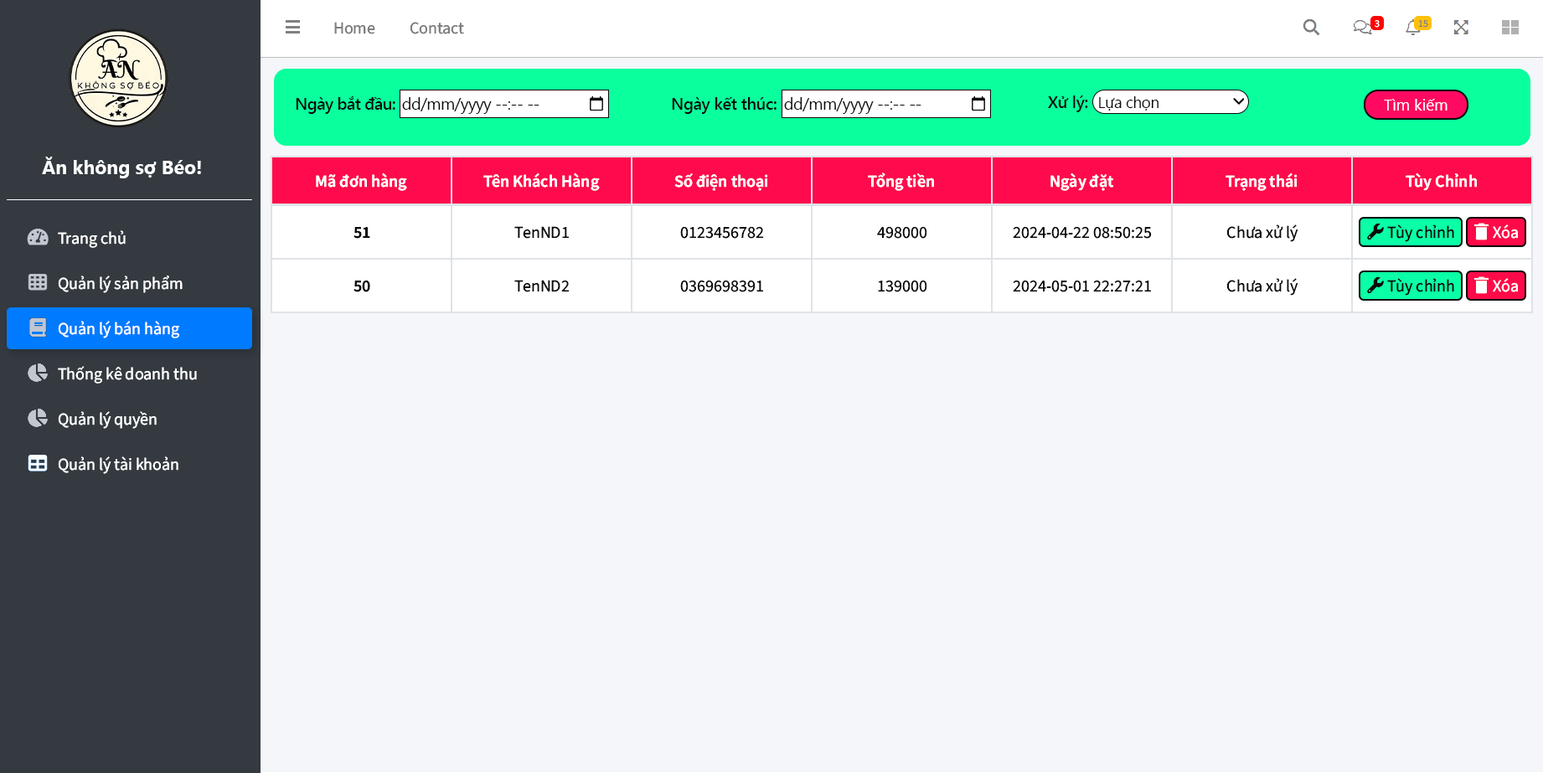
<style>
.page{position:relative;width:1543px;height:773px;background:#f4f6f9}
.page>*{position:absolute;margin:0}
.t1{font:16.7px "SourceSansRoman-Regular";color:#7f7f7f}
.t2{font:10px "SourceSansRoman-Regular";color:#ffffff}
.t3{font:10px "SourceSansRoman-Regular";color:#857f7f}
.t4{font:16.7px "SegoeUI-Semibold";letter-spacing:-0.03em;color:#000000}
.t5{font:16.7px "SegoeUI";letter-spacing:-0.03em;color:#000000}
.t6{font:16.7px "SegoeUI-Semibold";letter-spacing:-0.02em;color:#000000}
.t7{font:15.9px "SegoeUI";letter-spacing:-0.02em;color:#000000}
.t8{font:15.9px "SegoeUI";color:#ffffff}
.t9{font:19.3px "SegoeUI-Bold";color:#ffffff}
.t10{font:16.7px "SourceSansRoman-Semibold";color:#ffffff}
.t11{font:16.7px "SourceSansRoman-Regular";color:#ffffff}
.t12{font:16.7px "SourceSansRoman-Semibold";color:#000000}
.t13{font:16.7px "SourceSansRoman-Regular";color:#000000}
</style>
<div class="page">
<p class="t1" style="left:334px;top:22px;width:41px;height:12px">Home</p>
<p class="t1" style="left:410px;top:22px;width:54px;height:12px">Contact</p>
<p class="t2" style="left:1374px;top:20px;width:5px;height:8px">3</p>
<p class="t3" style="left:1418px;top:20px;width:10px;height:8px">15</p>
<p class="t4" style="left:296px;top:96px;width:99px;height:18px">Ngày bắt đầu:</p>
<p class="t5" style="left:402px;top:97px;width:137px;height:17px">dd/mm/yyyy --:-- --</p>
<p class="t6" style="left:672px;top:97px;width:104px;height:17px">Ngày kết thúc:</p>
<p class="t5" style="left:784px;top:97px;width:137px;height:17px">dd/mm/yyyy --:-- --</p>
<p class="t6" style="left:1048px;top:95px;width:40px;height:17px">Xử lý:</p>
<p class="t7" style="left:1099px;top:96px;width:59px;height:15px">Lựa chọn</p>
<p class="t8" style="left:1384px;top:99px;width:63px;height:12px">Tìm kiếm</p>
<p class="t9" style="left:42px;top:157px;width:159px;height:21px">Ăn không sợ Béo!</p>
<p class="t10" style="left:316px;top:173px;width:91px;height:18px">Mã đơn hàng</p>
<p class="t10" style="left:483px;top:173px;width:117px;height:18px">Tên Khách Hàng</p>
<p class="t10" style="left:674px;top:173px;width:94px;height:18px">Số điện thoại</p>
<p class="t10" style="left:868px;top:173px;width:66px;height:18px">Tổng tiền</p>
<p class="t10" style="left:1050px;top:173px;width:63px;height:18px">Ngày đặt</p>
<p class="t10" style="left:1225px;top:173px;width:72px;height:18px">Trạng thái</p>
<p class="t10" style="left:1405px;top:173px;width:71px;height:18px">Tùy Chỉnh</p>
<p class="t11" style="left:58px;top:230px;width:68px;height:18px">Trang chủ</p>
<p class="t12" style="left:353px;top:227px;width:17px;height:12px">51</p>
<p class="t13" style="left:514px;top:226px;width:55px;height:13px">TenND1</p>
<p class="t13" style="left:680px;top:226px;width:84px;height:13px">0123456782</p>
<p class="t13" style="left:877px;top:226px;width:50px;height:13px">498000</p>
<p class="t13" style="left:1013px;top:226px;width:139px;height:13px">2024-04-22 08:50:25</p>
<p class="t13" style="left:1226px;top:224px;width:72px;height:18px">Chưa xử lý</p>
<p class="t13" style="left:1387px;top:224px;width:67px;height:18px">Tùy chỉnh</p>
<p class="t11" style="left:1492px;top:224px;width:26px;height:15px">Xóa</p>
<p class="t11" style="left:58px;top:276px;width:125px;height:17px">Quản lý sản phẩm</p>
<p class="t12" style="left:353px;top:280px;width:17px;height:12px">50</p>
<p class="t13" style="left:514px;top:280px;width:55px;height:12px">TenND2</p>
<p class="t13" style="left:680px;top:280px;width:83px;height:12px">0369698391</p>
<p class="t13" style="left:878px;top:280px;width:49px;height:12px">139000</p>
<p class="t13" style="left:1013px;top:280px;width:138px;height:12px">2024-05-01 22:27:21</p>
<p class="t13" style="left:1226px;top:278px;width:72px;height:18px">Chưa xử lý</p>
<p class="t13" style="left:1387px;top:278px;width:67px;height:18px">Tùy chỉnh</p>
<p class="t11" style="left:1492px;top:278px;width:26px;height:14px">Xóa</p>
<p class="t11" style="left:58px;top:321px;width:121px;height:17px">Quản lý bán hàng</p>
<p class="t11" style="left:58px;top:366px;width:139px;height:18px">Thống kê doanh thu</p>
<p class="t11" style="left:58px;top:411px;width:99px;height:18px">Quản lý quyền</p>
<p class="t11" style="left:58px;top:456px;width:120px;height:18px">Quản lý tài khoản</p>
</div>
